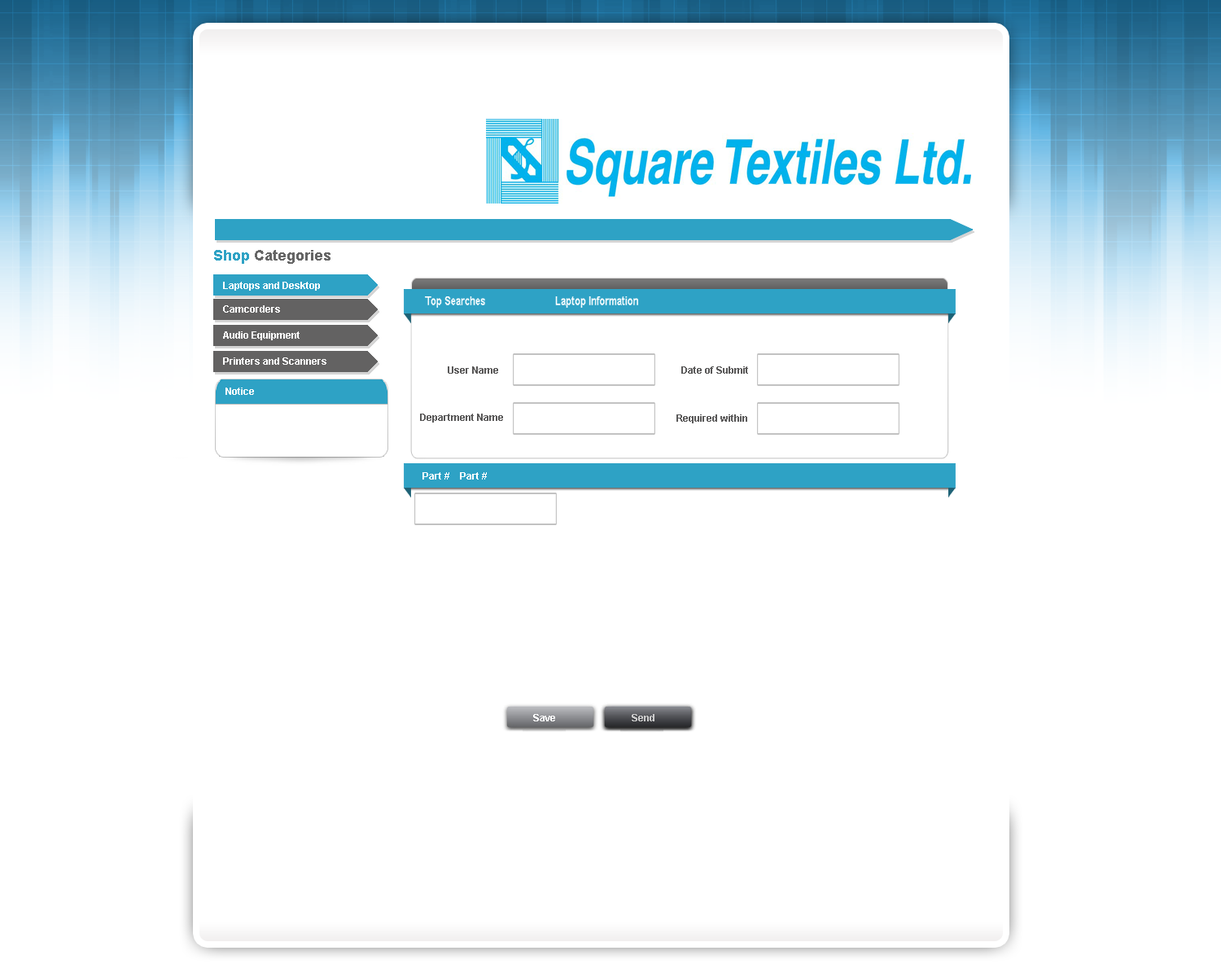
<style>
.page{position:relative;width:1221px;height:977px;background:#ffffff}
.page>*{position:absolute;margin:0}
.t1{font:14.7px "Arial-BoldMT";color:#666666}
.t2{font:14.7px "Arial-BoldMT";color:#2ea2c5}
.t3{font:9.8px "Arial-BoldMT";color:#ffffff}
.t4{font:12.7px "Arial-BoldMT";color:#ffffff;scale:0.75 1}
.t5{font:9.8px "Arial-BoldMT";color:#5a5959}
.t6{font:9.8px "Arial-BoldMT";color:#fbfbfb}
.t7{font:9.8px "Arial-BoldMT";color:#fdfdfd}
.t8{font:9.8px "Arial-BoldMT";color:#cccccc}
</style>
<div class="page">
<p class="t1" style="left:214px;top:250px;width:116px;height:14px"><span class="t2">Shop </span>Categories</p>
<p class="t3" style="left:223px;top:282px;width:97px;height:9px">Laptops and Desktop</p>
<p class="t3" style="left:223px;top:305px;width:57px;height:8px">Camcorders</p>
<p class="t4" style="left:425px;top:296px;width:213px;height:12px">Top Searches                         Laptop Information</p>
<p class="t3" style="left:223px;top:331px;width:77px;height:9px">Audio Equipment</p>
<p class="t3" style="left:223px;top:357px;width:103px;height:8px">Printers and Scanners</p>
<p class="t5" style="left:448px;top:366px;width:50px;height:8px">User Name</p>
<p class="t5" style="left:681px;top:366px;width:67px;height:8px">Date of Submit</p>
<p class="t6" style="left:225px;top:387px;width:29px;height:8px">Notice</p>
<p class="t5" style="left:420px;top:413px;width:83px;height:9px">Department Name</p>
<p class="t5" style="left:676px;top:414px;width:71px;height:9px">Required within</p>
<p class="t3" style="left:422px;top:472px;width:27px;height:7px">Part #</p>
<p class="t3" style="left:460px;top:472px;width:27px;height:7px">Part #</p>
<p class="t7" style="left:533px;top:714px;width:22px;height:7px">Save</p>
<p class="t8" style="left:632px;top:714px;width:22px;height:7px">Send</p>
</div>
